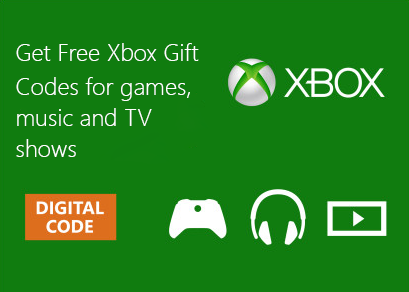
<style>
.page{position:relative;width:409px;height:292px;background:#107c0f}
.page>*{position:absolute;margin:0}
.t1{font:24px "SegoeUI-Light";color:#ffffff}
.t2{font:24px/31px "SegoeUI-Light";color:#ffffff}
</style>
<div class="page">
<p class="t1" style="left:16px;top:43px;width:183px;height:18px">Get Free Xbox Gift</p>
<p class="t2" style="left:16px;top:77px;width:174px;height:80px">Codes for games, music and TV shows</p>
</div>
